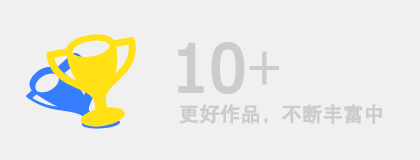
<style>
.page{position:relative;width:420px;height:160px;background:#f0f0f0}
.page>*{position:absolute;margin:0}
.t1{font:66px "Tahoma";color:#cccccc;font-weight:bold}
.t2{font:66px "SimSun";color:#cccccc;font-weight:bold}
.t3{font:20px "HYb1gj";color:#cccccc;font-weight:bold}
</style>
<div class="page">
<p class="t1" style="left:178px;top:42px;width:102px;height:52px">10<span class="t2">+</span></p>
<p class="t3" style="left:179px;top:104px;width:203px;height:20px">更好作品，不断丰富中</p>
</div>
